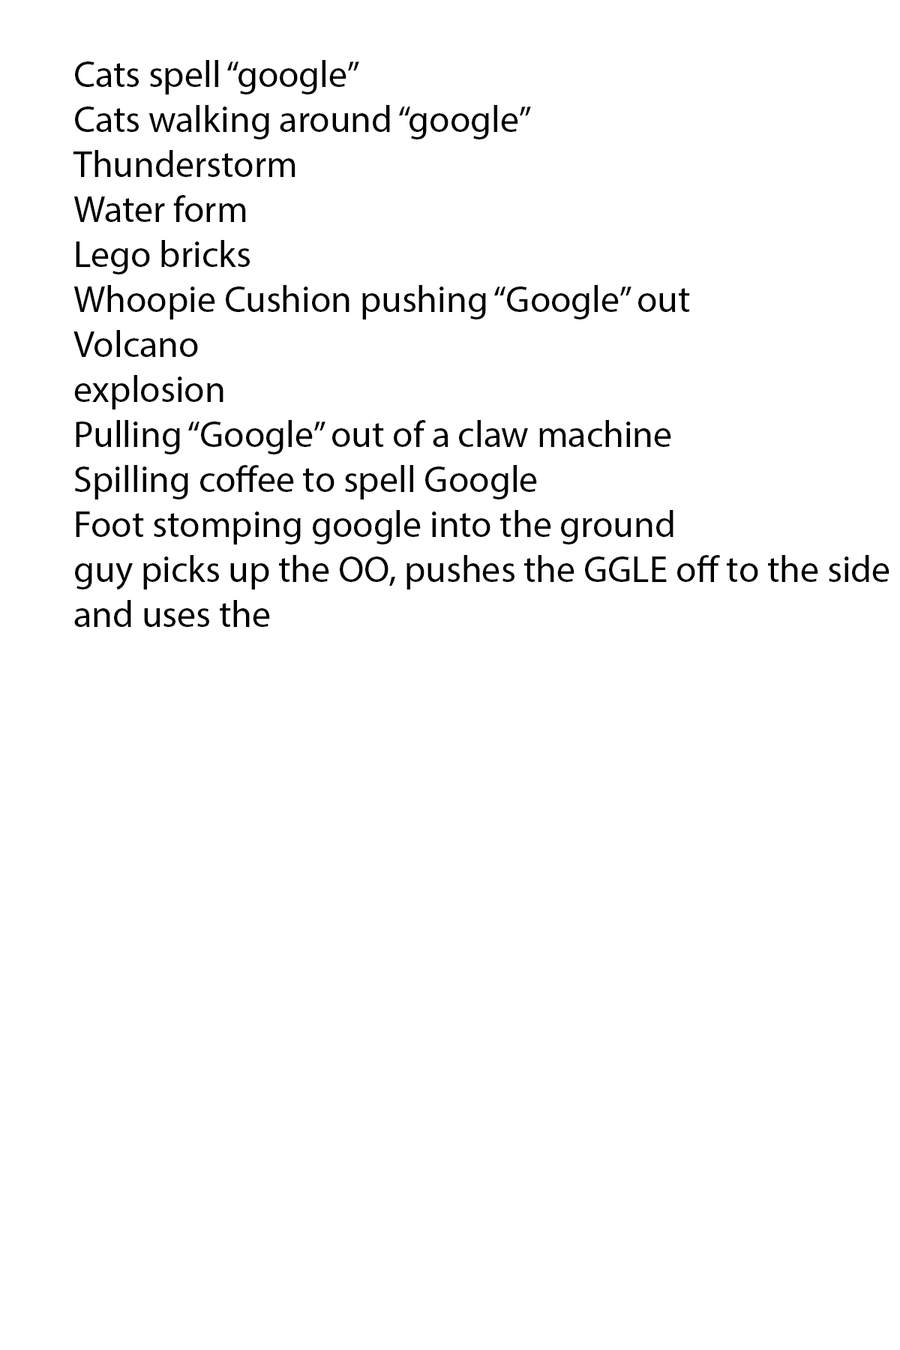
<style>
.page{position:relative;width:900px;height:1350px;background:#ffffff}
.page>*{position:absolute;margin:0}
.t1{font:9px "MyriadPro-Regular";color:#000000}
</style>
<div class="page">
<p class="t1" style="left:73px;top:60px;width:817px;height:567px">Cats spell “google”<br>Cats walking around “google”<br>Thunderstorm<br>Water form<br>Lego bricks<br>Whoopie Cushion pushing “Google” out<br>Volcano<br>explosion<br>Pulling “Google” out of a claw machine<br>Spilling coffee to spell Google<br>Foot stomping google into the ground<br>guy picks up the OO, pushes the GGLE off to the side<br>and uses the</p>
</div>
